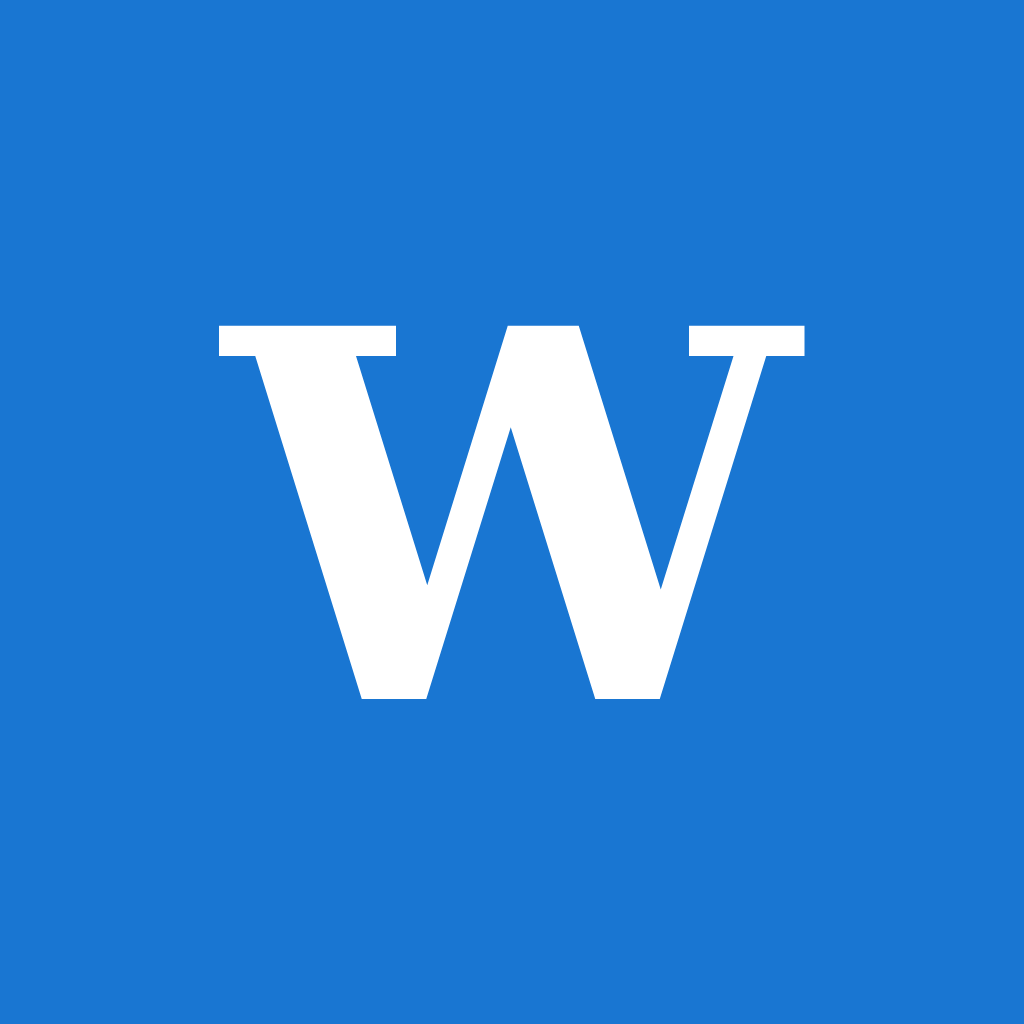
<style>
.page{position:relative;width:1024px;height:1024px;background:#1976d2}
.page>*{position:absolute;margin:0}
.t1{font:512px "DejaVuSerif-Bold";letter-spacing:0.1em;color:#ffffff}
</style>
<div class="page">
<p class="t1" style="left:219px;top:325px;width:586px;height:374px">W</p>
</div>
